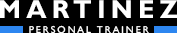
<style>
.page{position:relative;width:177px;height:33px;background:#000000}
.page>*{position:absolute;margin:0}
.t1{font:26px "GillSansMT-Bold";letter-spacing:0.2em;color:#ffffff}
.t2{font:10px "GillSansMT";letter-spacing:0.2em;color:#ffffff}
</style>
<div class="page">
<p class="t1" style="left:0px;top:0px;width:177px;height:18px">MARTINEZ</p>
<p class="t2" style="left:29px;top:25px;width:120px;height:9px">PERSONAL TRAINER</p>
</div>
